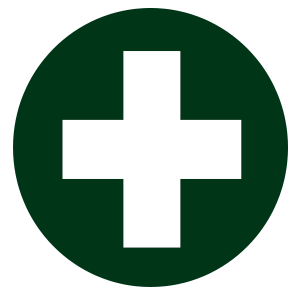
<style>
.page{position:relative;width:300px;height:300px;background:#ffffff}
.page>*{position:absolute;margin:0}
.t1{font:385px "Poppins-Bold";color:#ffffff;scale:0.91 1}
</style>
<div class="page">
<p class="t1" style="left:62px;top:51px;width:180px;height:197px">+</p>
</div>
